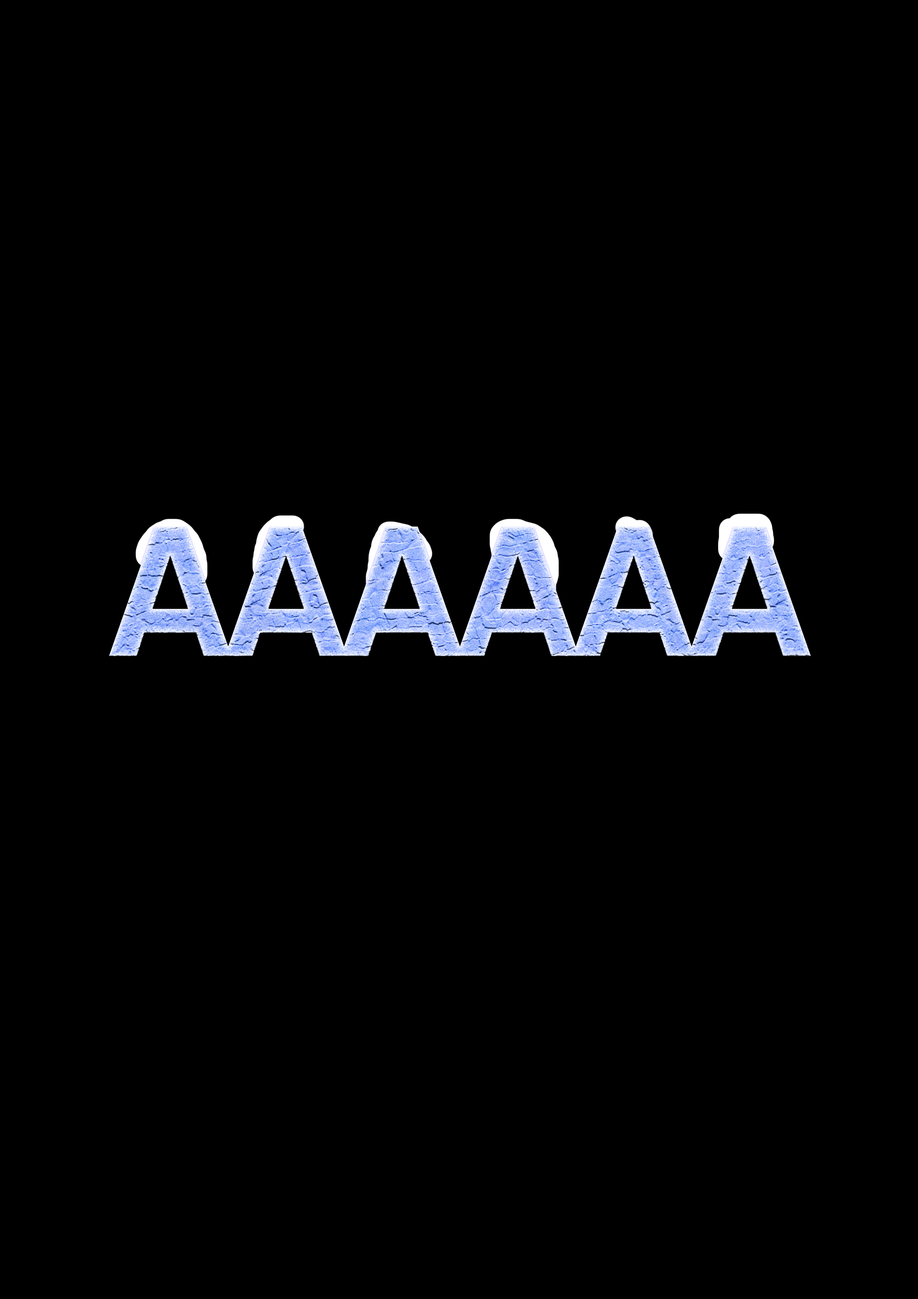
<style>
.page{position:relative;width:918px;height:1299px;background:#000000}
.page>*{position:absolute;margin:0}
.t1{font:185.1px "Gilroy-Bold";letter-spacing:-0.05em}
</style>
<div class="page">
<p class="t1" style="left:109px;top:526px;width:702px;height:130px">АААААА</p>
</div>
